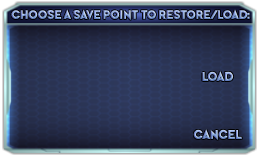
<style>
.page{position:relative;width:259px;height:157px}
.page>*{position:absolute;margin:0}
.t1{font:12.5px "PerfectlyTogether"}
.t2{font:13px "PerfectlyTogether"}
</style>
<div class="page">
<p class="t1" style="left:11px;top:9px;width:239px;height:12px">Choose a Save point to Restore/Load:</p>
<p class="t2" style="left:202px;top:70px;width:32px;height:12px">Load</p>
<p class="t2" style="left:193px;top:128px;width:49px;height:13px">Cancel</p>
</div>
